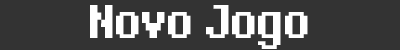
<style>
.page{position:relative;width:400px;height:50px;background:#333333}
.page>*{position:absolute;margin:0}
.t1{font:48.7px "DeterminationSans";color:#ffffff}
</style>
<div class="page">
<p class="t1" style="left:90px;top:5px;width:218px;height:44px">Novo Jogo</p>
</div>
